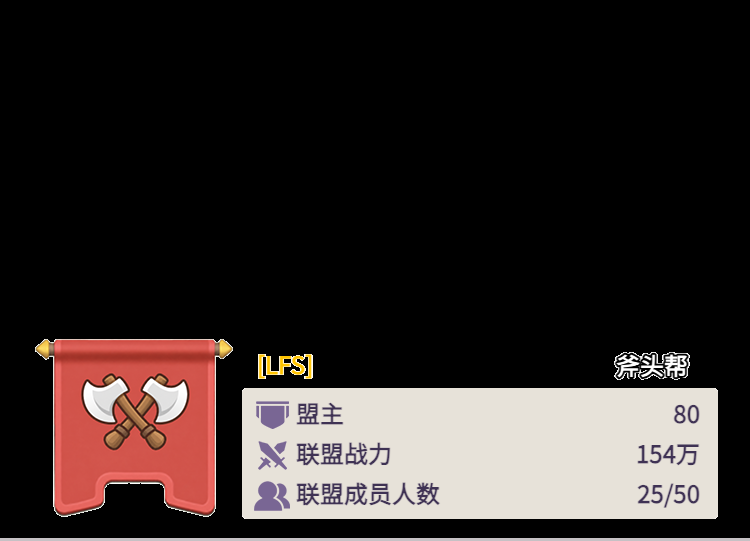
<style>
.page{position:relative;width:750px;height:541px;background:#000000}
.page>*{position:absolute;margin:0}
.t1{font:24px "WebPSD-18463539-0-Regular";color:#ffc400;font-weight:bold}
.t2{font:24px "WebPSD-18463539-0-Regular";color:#ffffff;font-weight:bold}
.t3{font:24px "WebPSD-18463539-0-Regular";color:#3f3254;font-weight:bold}
</style>
<div class="page">
<p class="t1" style="left:257px;top:350px;width:200px;height:30px">[LFS]</p>
<p class="t2" style="left:500px;top:350px;width:190px;height:32px">斧头帮</p>
<p class="t3" style="left:296px;top:398px;width:160px;height:32px">盟主</p>
<p class="t3" style="left:560px;top:398px;width:140px;height:32px">80</p>
<p class="t3" style="left:296px;top:438px;width:160px;height:32px">联盟战力</p>
<p class="t3" style="left:560px;top:438px;width:140px;height:32px">154万</p>
<p class="t3" style="left:296px;top:478px;width:180px;height:32px">联盟成员人数</p>
<p class="t3" style="left:560px;top:478px;width:140px;height:32px">25/50</p>
</div>
